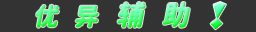
<style>
.page{position:relative;width:256px;height:32px;background:#333333}
.page>*{position:absolute;margin:0}
.t1{font:24px "JiangChengYuanTi-700W";font-style:italic}
.t2{font:27px "JiangChengYuanTi-700W";font-style:italic}
</style>
<div class="page">
<p class="t1" style="left:36px;top:4px;width:63px;height:24px">优   异</p>
<p class="t2" style="left:117px;top:2px;width:73px;height:26px">辅   助</p>
</div>
